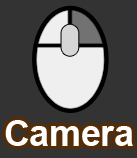
<style>
.page{position:relative;width:137px;height:158px;background:#333333}
.page>*{position:absolute;margin:0}
.t1{font:36px "Arial-BoldMT";letter-spacing:-0.01em;color:#ffffff}
</style>
<div class="page">
<p class="t1" style="left:5px;top:120px;width:128px;height:26px">Camera</p>
</div>
